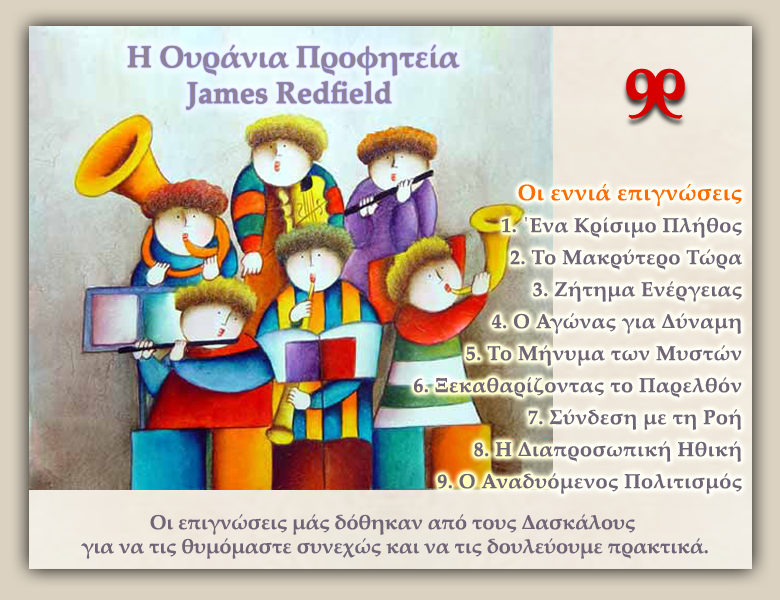
<style>
.page{position:relative;width:780px;height:600px}
.page>*{position:absolute;margin:0}
.t1{font:30px/36px "PalatinoLinotype-Bold";color:#8e8198}
.t2{font:20px/32px "PalatinoLinotype-Bold";letter-spacing:0.025em;color:#6f6577}
.t3{font:22px/32px "PalatinoLinotype-Bold";letter-spacing:0.025em;color:#ff6c00}
.t4{font:20px/24px "PalatinoLinotype-Bold";color:#6f6577}
</style>
<div class="page">
<p class="t1" style="left:127px;top:44px;width:333px;height:66px;text-align:center">Η Ουράνια Προφητεία<br>James Redfield</p>
<p class="t2" style="left:414px;top:183px;width:328px;height:311px;text-align:right"><span class="t3">Οι εννιά επιγνώσεις<br></span>1. ΄Ενα Κρίσιμο Πλήθος<br>2. Το Μακρύτερο Τώρα<br>3. Ζήτημα Ενέργειας<br>4. Ο Αγώνας για Δύναμη<br>5. Το Μήνυμα των Μυστών<br>6. Ξεκαθαρίζοντας το Παρελθόν<br>7. Σύνδεση με τη Ροή<br>8. Η Διαπροσωπική Ηθική<br>9. Ο Αναδυόμενος Πολιτισμός</p>
<p class="t4" style="left:81px;top:514px;width:627px;height:45px;text-align:center">Οι επιγνώσεις μάς δόθηκαν από τους Δασκάλους <br>για να τις θυμόμαστε συνεχώς και να τις δουλεύουμε πρακτικά.</p>
</div>
